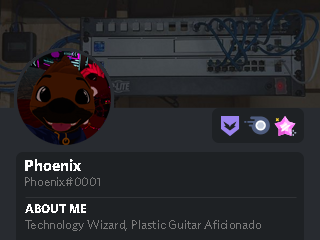
<style>
.page{position:relative;width:320px;height:240px;background:#1e2124}
.page>*{position:absolute;margin:0}
.t1{font:16.7px "Whitney-Bold";color:#ffffff}
.t2{font:12.5px "Whitney-Medium";color:#797979}
.t3{font:12.5px "Whitney-Bold";color:#ffffff}
</style>
<div class="page">
<p class="t1" style="left:25px;top:159px;width:56px;height:12px">Phoenix</p>
<p class="t2" style="left:25px;top:177px;width:75px;height:9px">Phoenix#0001</p>
<p class="t3" style="left:25px;top:204px;width:61px;height:9px">ABOUT ME</p>
<p class="t2" style="left:25px;top:220px;width:236px;height:11px">Technology Wizard, Plastic Guitar Aficionado</p>
</div>
